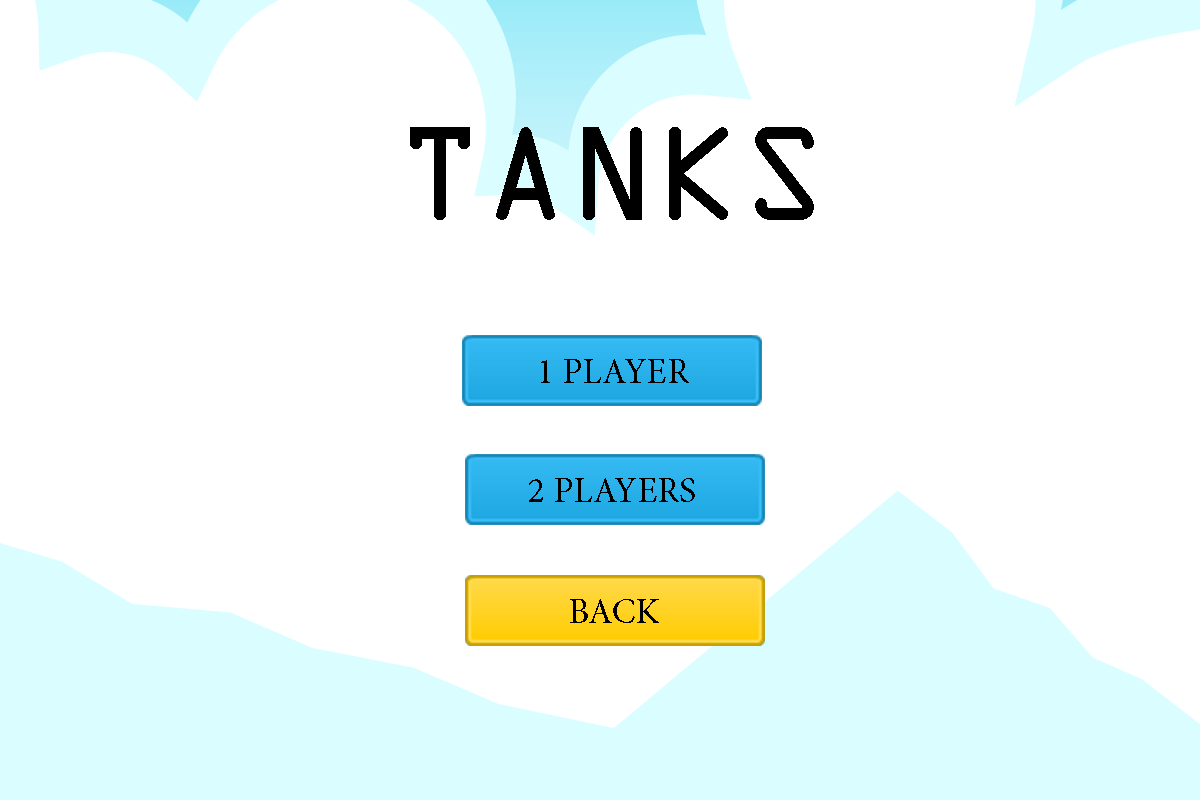
<style>
.page{position:relative;width:1200px;height:800px;background:#ffffff}
.page>*{position:absolute;margin:0}
.t1{font:120px "OCRAStd";color:#000000}
.t2{font:36px "MinionPro-Regular";color:#000000}
</style>
<div class="page">
<p class="t1" style="left:410px;top:127px;width:404px;height:93px">TANKS</p>
<p class="t2" style="left:541px;top:359px;width:148px;height:24px">1 PLAYER</p>
<p class="t2" style="left:529px;top:478px;width:166px;height:24px">2 PLAYERS</p>
<p class="t2" style="left:570px;top:599px;width:89px;height:24px">BACK</p>
</div>
